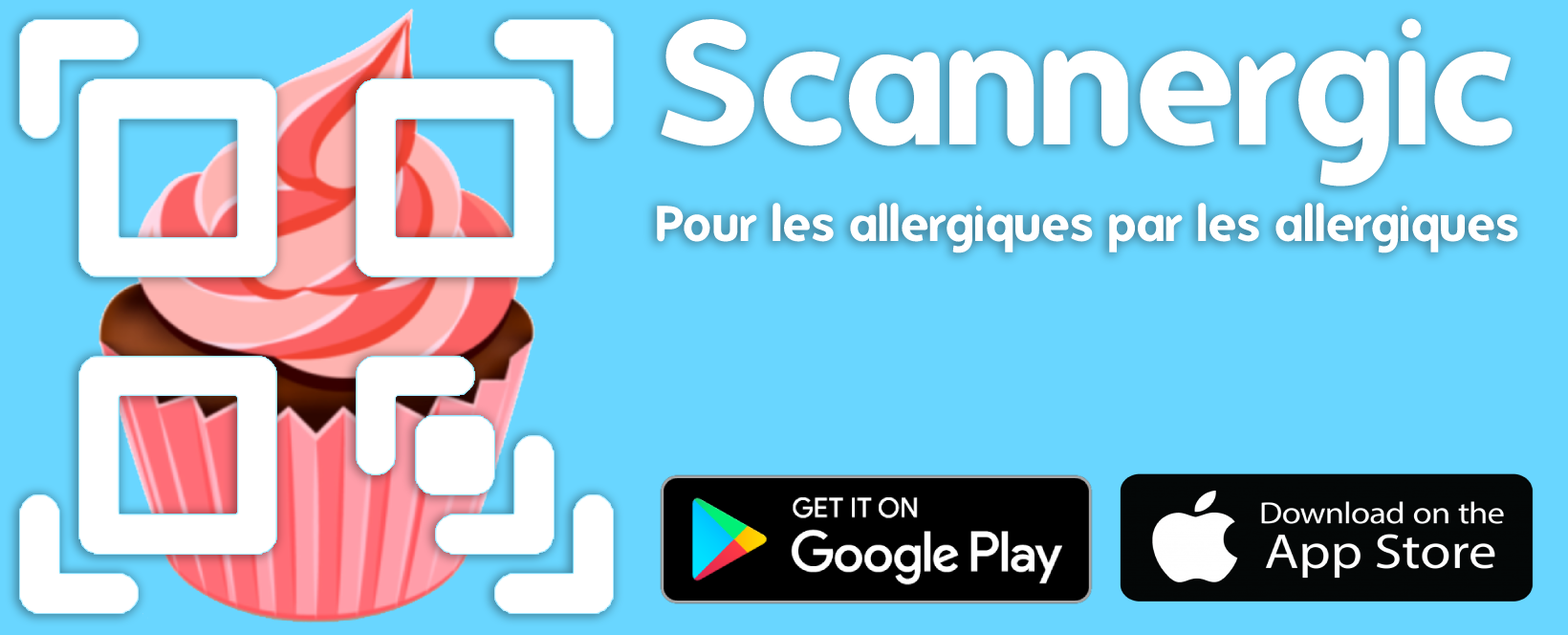
<style>
.page{position:relative;width:1568px;height:635px;background:#69d6ff}
.page>*{position:absolute;margin:0}
.t1{font:172.1px "Folks-Bold";color:#ffffff}
.t2{font:48.8px "Folks-Bold";color:#ffffff}
</style>
<div class="page">
<p class="t1" style="left:661px;top:18px;width:852px;height:168px">Scannergic</p>
<p class="t2" style="left:657px;top:203px;width:861px;height:50px">Pour les allergiques par les allergiques</p>
</div>
